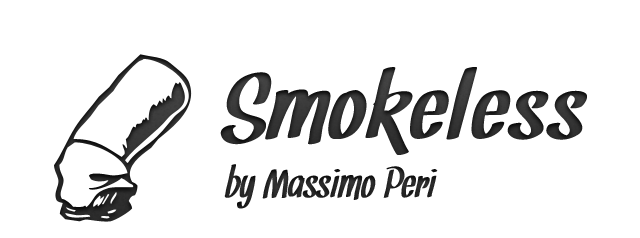
<style>
.page{position:relative;width:640px;height:238px;background:#ffffff}
.page>*{position:absolute;margin:0}
.t1{font:96px "Snickles";letter-spacing:0.025em;color:#303030;scale:1.2 1}
.t2{font:44px "Snickles";color:#252525}
</style>
<div class="page">
<p class="t1" style="left:220px;top:67px;width:367px;height:88px">Smokeless</p>
<p class="t2" style="left:224px;top:164px;width:214px;height:45px">by Massimo Peri</p>
</div>
